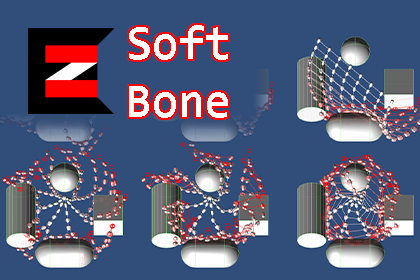
<style>
.page{position:relative;width:420px;height:280px;background:#314d79}
.page>*{position:absolute;margin:0}
.t1{font:48px "Consolas-Bold";color:#ffffff}
</style>
<div class="page">
<p class="t1" style="left:129px;top:25px;width:99px;height:93px">Soft<br>Bone</p>
</div>
